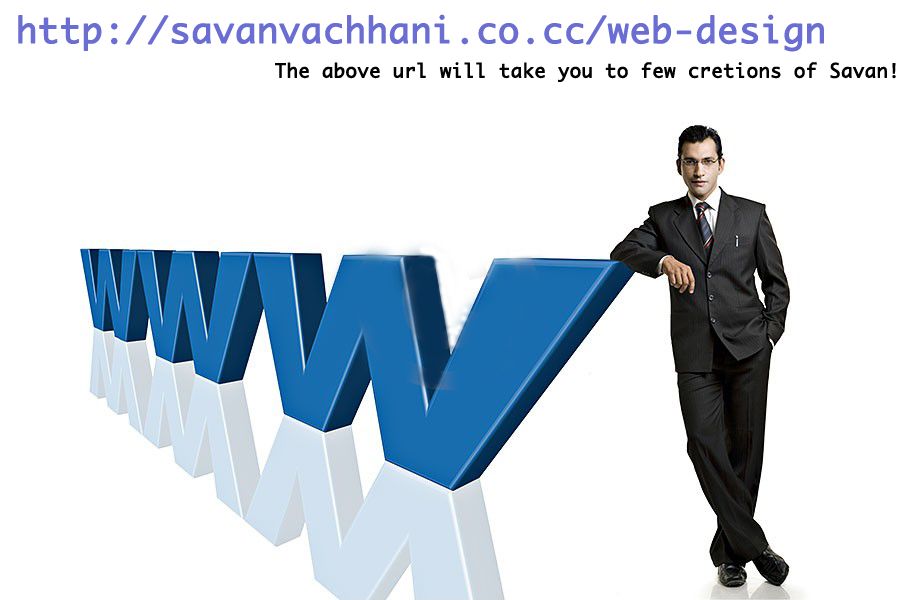
<style>
.page{position:relative;width:900px;height:600px;background:#ffffff}
.page>*{position:absolute;margin:0}
.t1{font:34.7px "Monaco";letter-spacing:0.005em;color:#6a6dd2;font-weight:bold}
.t2{font:18.7px "Monaco";letter-spacing:0.005em;color:#010101;font-weight:bold}
</style>
<div class="page">
<p class="t1" style="left:18px;top:14px;width:806px;height:38px">http://savanvachhani.co.cc/web-design</p>
<p class="t2" style="left:275px;top:62px;width:621px;height:20px">The above url will take you to few cretions of Savan!</p>
</div>
